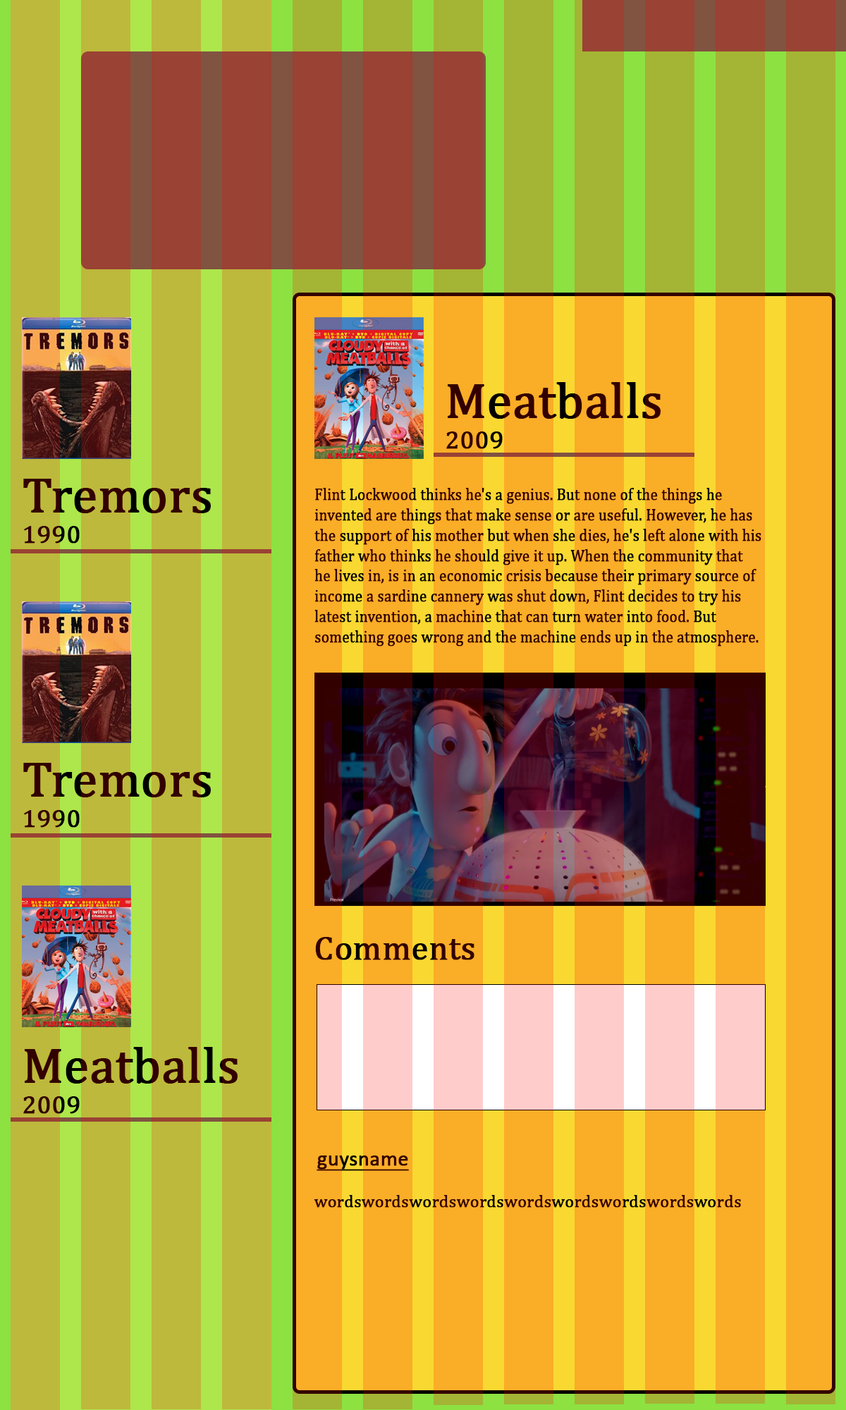
<style>
.page{position:relative;width:846px;height:1410px}
.page>*{position:absolute;margin:0}
.t1{font:49.8px "Cambria";color:#330000;font-weight:bold}
.t2{font:25.4px "Cambria";color:#330000;font-weight:bold}
.t3{font:49.8px "Cambria";font-weight:bold}
.t4{font:25.4px "Cambria";font-weight:bold}
.t5{font:16.9px "Cambria";color:#330000;font-weight:bold;scale:0.86 1}
.t6{font:33.8px "Cambria";color:#330000;font-weight:bold}
.t7{font:21.1px "Calibri";color:#330000;font-weight:bold;text-decoration:underline}
.t8{font:16.9px "Cambria";color:#330000;font-weight:bold}
</style>
<div class="page">
<p class="t1" style="left:446px;top:382px;width:214px;height:67px">Meatballs<br><span class="t2">2009</span></p>
<p class="t3" style="left:23px;top:479px;width:188px;height:64px">Tremors<br><span class="t4">1990</span></p>
<p class="t5" style="left:314px;top:488px;width:447px;height:158px">Flint Lockwood thinks he's a genius. But none of the things he invented are things that make sense or are useful. However, he has the support of his mother but when she dies, he's left alone with his father who thinks he should give it up. When the community that he lives in, is in an economic crisis because their primary source of income a sardine cannery was shut down, Flint decides to try his latest invention, a machine that can turn water into food. But something goes wrong and the machine ends up in the atmosphere. Later it starts raining food. The shifty mayor tries to use this as a way to help their community, but when Flint senses something wrong with the machine, the mayor convinces him to ignore it. However, as Flint predicts, chaos ensues.</p>
<p class="t3" style="left:23px;top:763px;width:188px;height:65px">Tremors<br><span class="t4">1990</span></p>
<p class="t6" style="left:315px;top:937px;width:159px;height:23px">Comments</p>
<p class="t1" style="left:23px;top:1047px;width:215px;height:67px">Meatballs<br><span class="t2">2009</span></p>
<p class="t7" style="left:316px;top:1155px;width:93px;height:16px">guysname</p>
<p class="t8" style="left:314px;top:1195px;width:427px;height:12px">wordswordswordswordswordswordswordswordswords</p>
</div>
